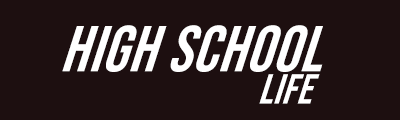
<style>
.page{position:relative;width:400px;height:120px;background:#1d0f10}
.page>*{position:absolute;margin:0}
.t1{font:68px "BebasNeue-Regular";letter-spacing:0.015em;color:#ffffff;scale:0.95 1}
.t2{font:44px "BebasNeue-Regular";letter-spacing:0.015em;color:#ffffff;scale:0.94 1}
</style>
<div class="page">
<p class="t1" style="left:62px;top:25px;width:261px;height:47px">HIGH SCHOOL</p>
<p class="t2" style="left:259px;top:74px;width:61px;height:30px">LIFE</p>
</div>
